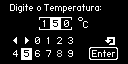
<style>
.page{position:relative;width:128px;height:64px;background:#000000}
.page>*{position:absolute;margin:0}
.t1{font:16px "HaxrCorp-4089";color:#ffffff}
.t2{font:16px "MyriadPro-Regular";color:#ffffff}
.t3{font:16px "HaxrCorp-4089";color:#010101}
.t4{font:16px "HaxrCorp-4089";color:#000000}
.t5{font:16px "HaxrCorp-4089";color:#dddddd}
</style>
<div class="page">
<p class="t1" style="left:10px;top:4px;width:91px;height:9px">Digite o Temperatura:</p>
<p class="t2" style="left:78px;top:17px;width:10px;height:11px">°<span class="t1">C</span></p>
<p class="t1" style="left:43px;top:20px;width:2px;height:7px">1</p>
<p class="t3" style="left:53px;top:20px;width:5px;height:7px">5</p>
<p class="t1" style="left:64px;top:20px;width:5px;height:7px">0</p>
<p class="t1" style="left:35px;top:37px;width:5px;height:7px">0</p>
<p class="t1" style="left:47px;top:37px;width:2px;height:7px">1</p>
<p class="t1" style="left:57px;top:37px;width:5px;height:7px">2</p>
<p class="t1" style="left:68px;top:37px;width:5px;height:7px">3</p>
<p class="t1" style="left:13px;top:50px;width:5px;height:7px">4</p>
<p class="t4" style="left:24px;top:50px;width:5px;height:7px">5</p>
<p class="t1" style="left:35px;top:50px;width:5px;height:7px">6</p>
<p class="t1" style="left:46px;top:50px;width:5px;height:7px">7</p>
<p class="t5" style="left:57px;top:50px;width:5px;height:7px">8</p>
<p class="t1" style="left:68px;top:50px;width:5px;height:7px">9</p>
<p class="t1" style="left:92px;top:50px;width:23px;height:7px">Enter</p>
</div>
